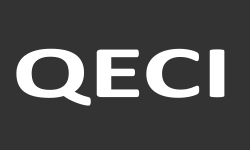
<style>
.page{position:relative;width:250px;height:150px;background:#333333}
.page>*{position:absolute;margin:0}
.t1{font:75px "Calibri-Bold";color:#ffffff;scale:1.5 1}
</style>
<div class="page">
<p class="t1" style="left:16px;top:48px;width:209px;height:58px">QECI</p>
</div>
